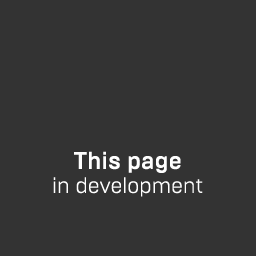
<style>
.page{position:relative;width:256px;height:256px;background:#333333}
.page>*{position:absolute;margin:0}
.t1{font:22px/24px "BrutalType-Light";color:#ffffff}
.t2{font:24px/24px "BrutalType-Medium";color:#ffffff}
</style>
<div class="page">
<p class="t1" style="left:53px;top:151px;width:150px;height:46px;text-align:center"><span class="t2">This page<br></span>in development</p>
</div>
